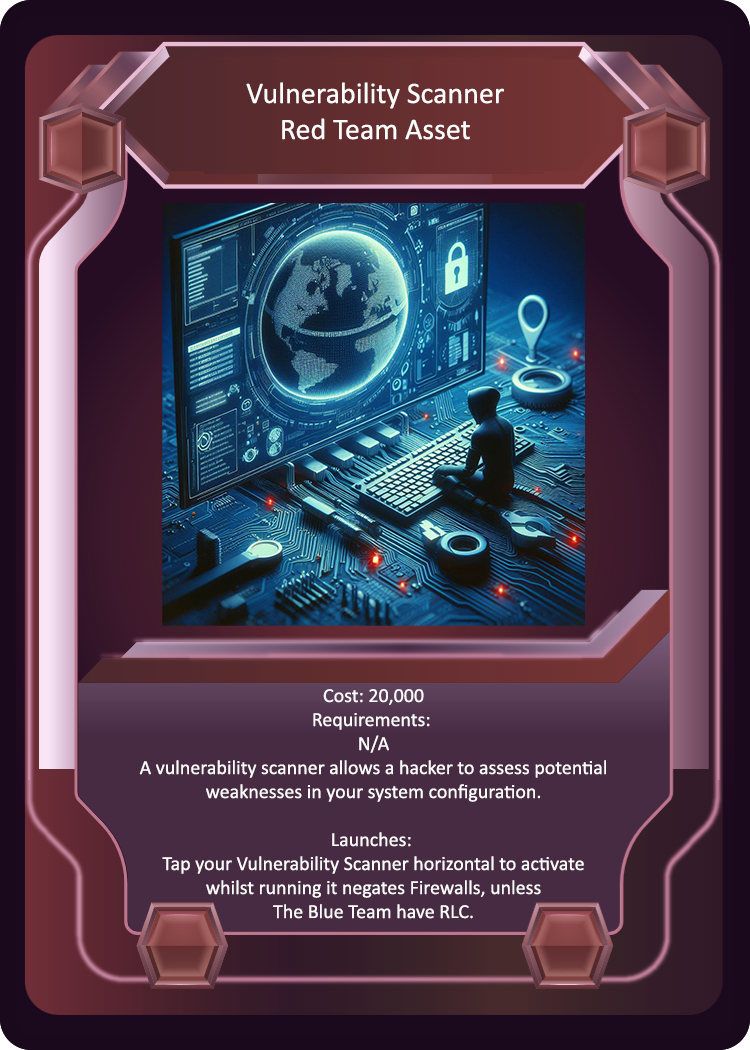
<style>
.page{position:relative;width:750px;height:1050px}
.page>*{position:absolute;margin:0}
.t1{font:30px "Calibri";color:#fcfbfb}
.t2{font:20px "Calibri";color:#fcfbfb}
</style>
<div class="page">
<p class="t1" style="left:246px;top:82px;width:258px;height:58px;text-align:center">Vulnerability Scanner<br>Red Team Asset</p>
<p class="t2" style="left:139px;top:689px;width:467px;height:230px;text-align:center">Cost: 20,000<br>Requirements: <br>N/A<br>A vulnerability scanner allows a hacker to assess potential<br>weaknesses in your system configuration.<br><br>Launches: <br>Tap your Vulnerability Scanner horizontal to activate<br>whilst running it negates Firewalls, unless<br>The Blue Team have RLC.</p>
</div>
